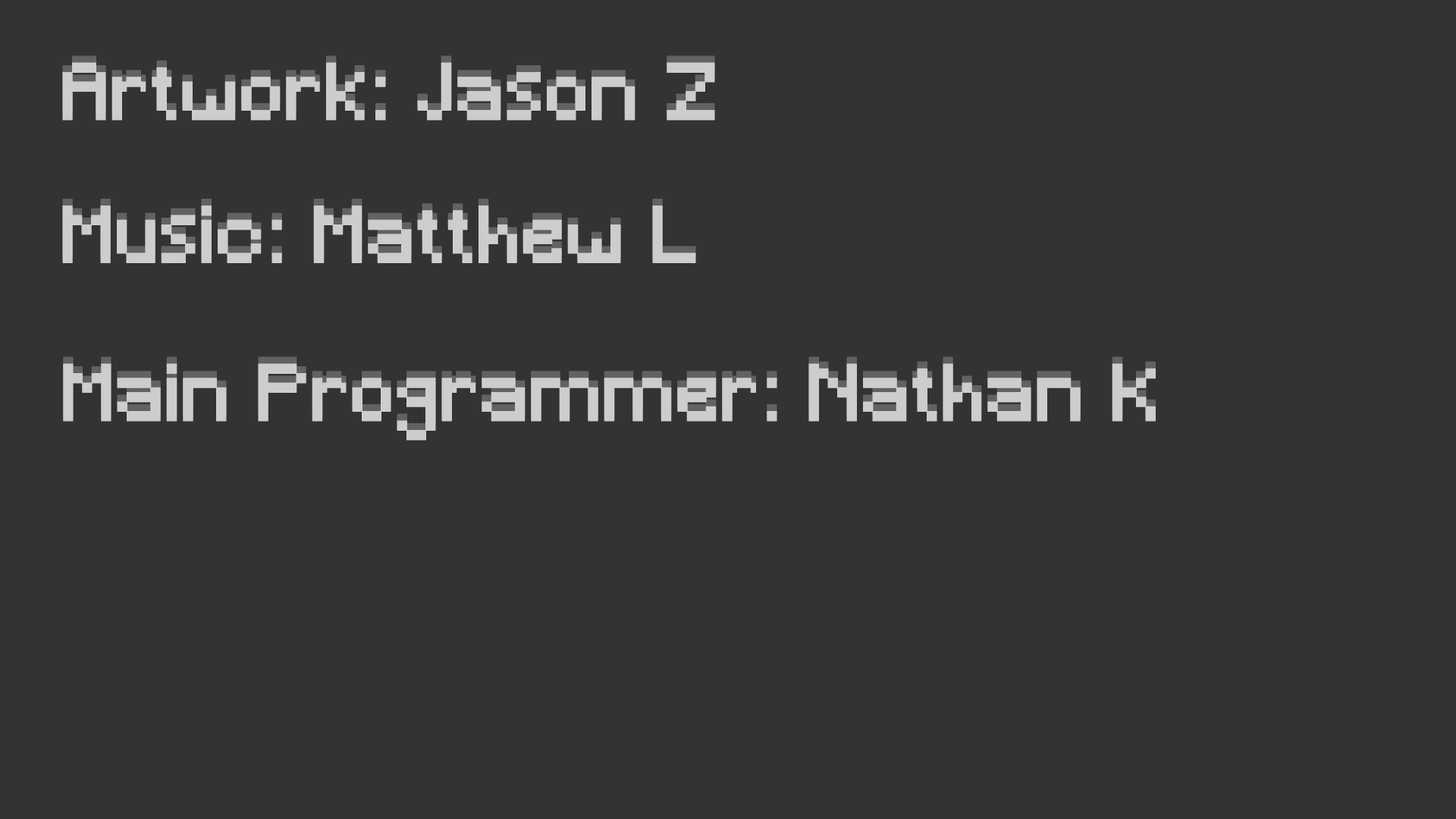
<style>
.page{position:relative;width:1456px;height:819px;background:#333333}
.page>*{position:absolute;margin:0}
.t1{font:75.8px "Minecraft";color:#cdcdcd;font-weight:bold}
</style>
<div class="page">
<p class="t1" style="left:62px;top:62px;width:653px;height:59px">Artwork: Jason Z</p>
<p class="t1" style="left:62px;top:206px;width:634px;height:57px">Music: Matthew L</p>
</div>
